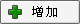
<style>
.page{position:relative;width:80px;height:24px;background:#f4f4f4}
.page>*{position:absolute;margin:0}
.t1{font:12px "SimSun";letter-spacing:0.2em;color:#000000}
</style>
<div class="page">
<p class="t1" style="left:32px;top:6px;width:25px;height:11px">增加</p>
</div>
